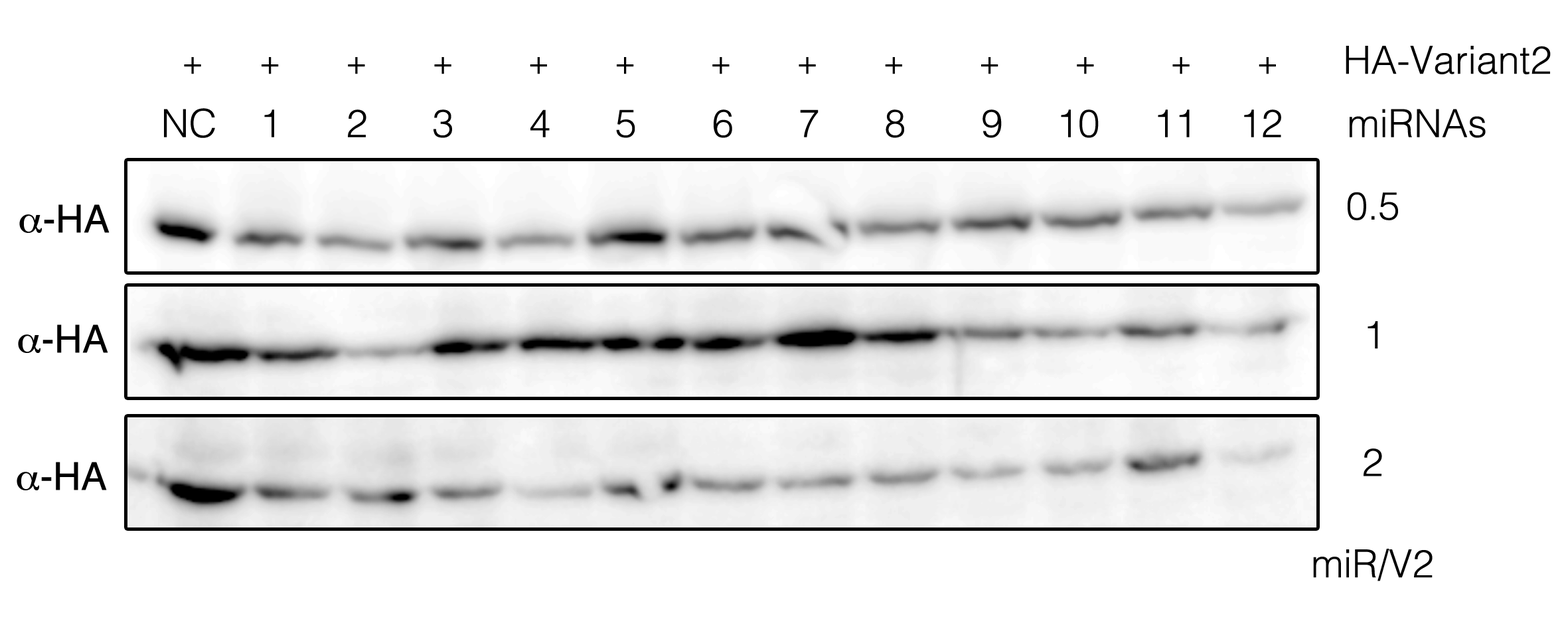
<style>
.page{position:relative;width:1568px;height:627px;background:#ffffff}
.page>*{position:absolute;margin:0}
.t1{font:33.2px "Helvetica-Light";color:#000000}
.t2{font:38.7px "Helvetica-Light";color:#000000}
.t3{font:38.7px "Helvetica";color:#000000}
.t4{font:38.7px "Symbol";color:#000000}
</style>
<div class="page">
<p class="t1" style="left:184px;top:46px;width:1367px;height:28px">+      +       +       +        +       +        +       +       +        +        +        +       +<span class="t2">      HA-Variant2</span></p>
<p class="t2" style="left:164px;top:108px;width:1322px;height:30px">NC    1      2      3       4      5       6      7      8       9     10     11    12      miRNAs</p>
<p class="t2" style="left:1348px;top:192px;width:50px;height:28px">0.5</p>
<p class="t3" style="left:19px;top:204px;width:91px;height:29px"><span class="t4">a</span>-HA</p>
<p class="t3" style="left:18px;top:325px;width:90px;height:28px"><span class="t4">a</span>-HA</p>
<p class="t2" style="left:1368px;top:321px;width:10px;height:28px">1</p>
<p class="t2" style="left:1364px;top:449px;width:18px;height:28px">2</p>
<p class="t3" style="left:17px;top:462px;width:90px;height:29px"><span class="t4">a</span>-HA</p>
<p class="t2" style="left:1313px;top:549px;width:120px;height:33px">miR/V2</p>
</div>
